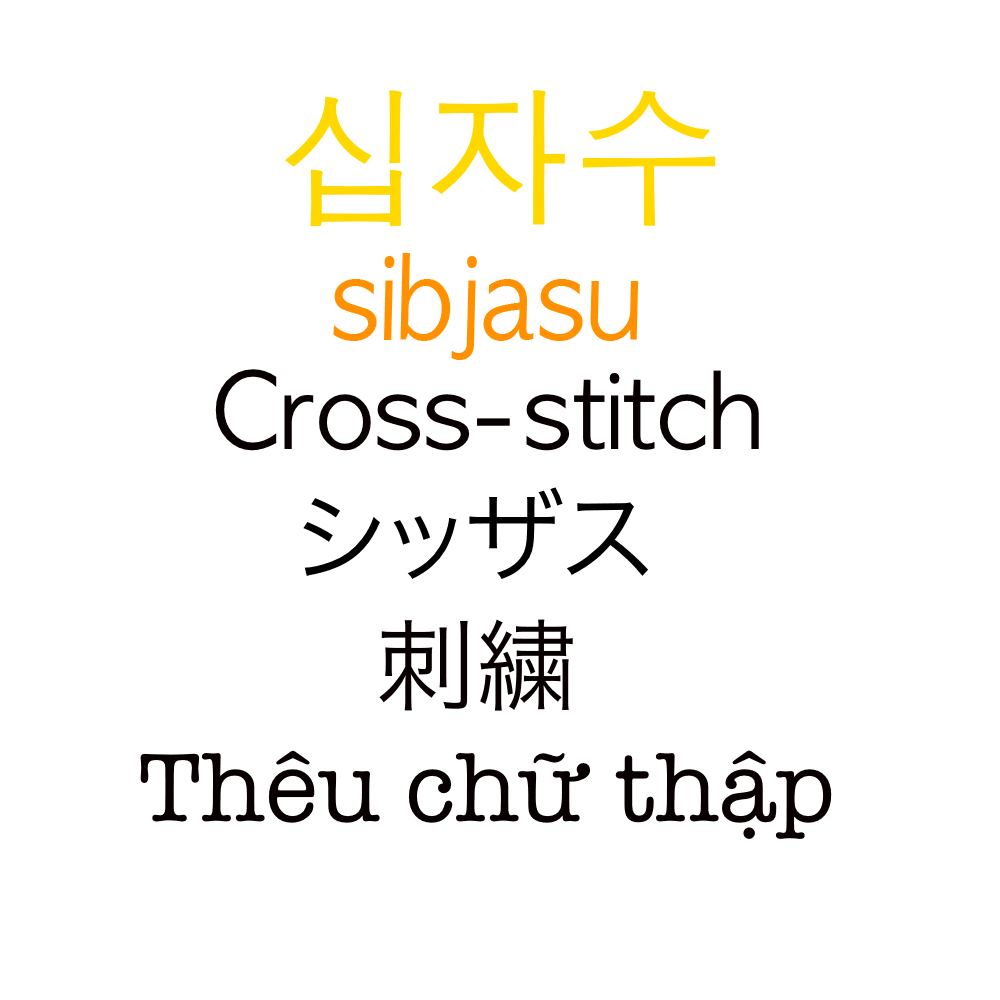
<style>
.page{position:relative;width:1000px;height:1000px;background:#ffffff}
.page>*{position:absolute;margin:0}
.t1{font:150px "AppleGothic";color:#ffd800}
.t2{font:111.2px "AppleGothic";color:#ff9000;scale:0.9 1}
.t3{font:100px "AppleGothic";color:#080000}
.t4{font:100px "HiraKakuProN-W3";color:#000000}
.t5{font:100px "HiraKakuProN-W3";color:#080000}
.t6{font:100px "AmericanTypewriter";color:#080000}
</style>
<div class="page">
<p class="t1" style="left:285px;top:90px;width:431px;height:137px">십자수</p>
<p class="t2" style="left:333px;top:253px;width:306px;height:107px">sibjasu</p>
<p class="t3" style="left:215px;top:369px;width:544px;height:82px">Cross-stitch</p>
<p class="t4" style="left:303px;top:487px;width:345px;height:92px">シッザス</p>
<p class="t5" style="left:379px;top:619px;width:194px;height:92px">刺繍</p>
<p class="t6" style="left:140px;top:750px;width:692px;height:89px">Thêu chữ thập</p>
</div>
